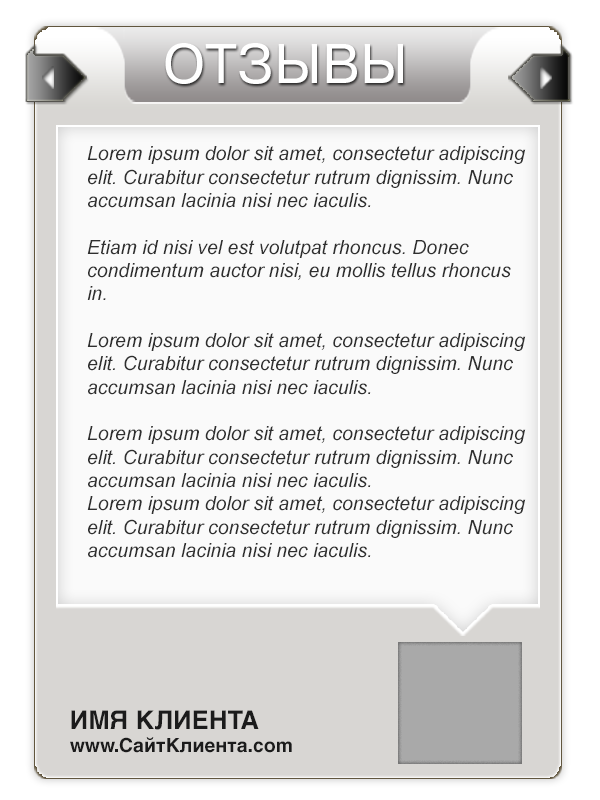
<style>
.page{position:relative;width:600px;height:800px;background:#fafafa}
.page>*{position:absolute;margin:0}
.t1{font:55.6px "PragmaticaBook-Reg";color:#ffffff;text-transform:uppercase}
.t2{font:19.4px "Arial-ItalicMT";color:#2f2f2f}
.t3{font:19.4px "HelveticaCyr-Bold";color:#1b1b1b}
.t4{font:25.7px "HelveticaCyr-Bold";color:#1b1b1b}
</style>
<div class="page">
<p class="t1" style="left:165px;top:43px;width:238px;height:41px">ОТЗЫВЫ</p>
<p class="t2" style="left:87px;top:146px;width:439px;height:412px">Lorem ipsum dolor sit amet, consectetur adipiscing elit. Curabitur consectetur rutrum dignissim. Nunc accumsan lacinia nisi nec iaculis. <br><br>Etiam id nisi vel est volutpat rhoncus. Donec condimentum auctor nisi, eu mollis tellus rhoncus in.  <br><br>Lorem ipsum dolor sit amet, consectetur adipiscing elit. Curabitur consectetur rutrum dignissim. Nunc accumsan lacinia nisi nec iaculis. <br><br>Lorem ipsum dolor sit amet, consectetur adipiscing elit. Curabitur consectetur rutrum dignissim. Nunc accumsan lacinia nisi nec iaculis. <br>Lorem ipsum dolor sit amet, consectetur adipiscing elit. Curabitur consectetur rutrum dignissim. Nunc accumsan lacinia nisi nec iaculis.</p>
<p class="t3" style="left:70px;top:710px;width:222px;height:43px"><span class="t4">ИМЯ КЛИЕНТА<br></span>www.СайтКлиента.com</p>
</div>
